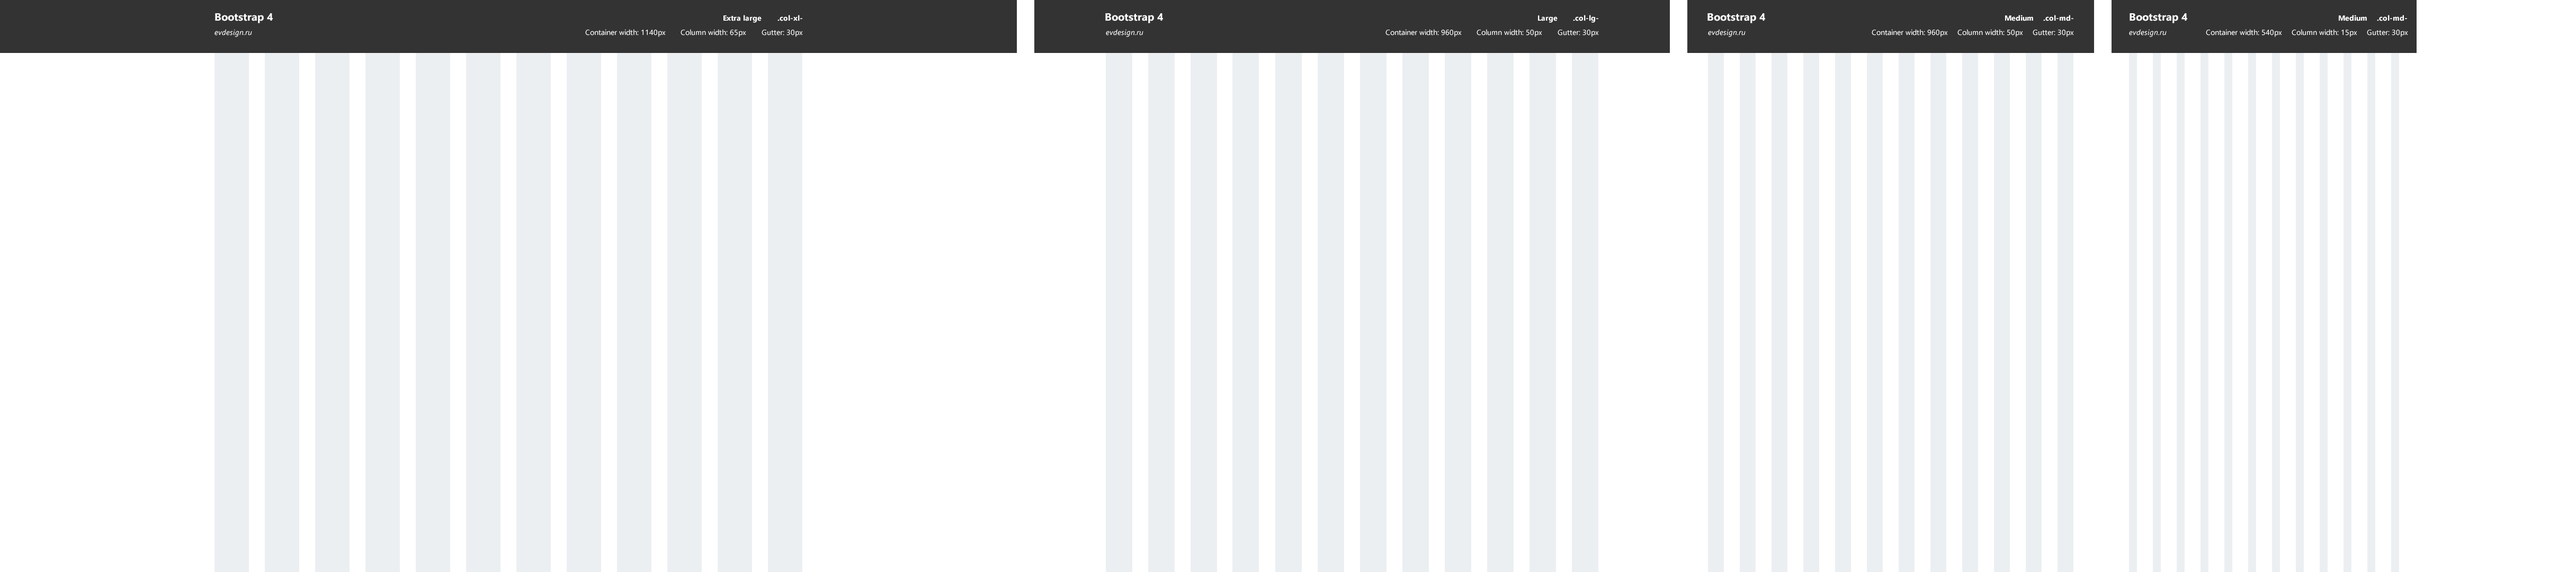
<style>
.page{position:relative;width:2576px;height:572px;background:#ffffff}
.page>*{position:absolute;margin:0}
.t1{font:10.6px "SegoeUI-Bold";color:#ffffff}
.t2{font:7.4px "SegoeUI-Bold";color:#ffffff}
.t3{font:7.4px "SegoeUI-Italic";color:#ffffff}
.t4{font:7.4px "SegoeUI";color:#ffffff}
</style>
<div class="page">
<p class="t1" style="left:215px;top:13px;width:58px;height:10px">Bootstrap 4</p>
<p class="t2" style="left:723px;top:15px;width:39px;height:8px">Extra large</p>
<p class="t2" style="left:777px;top:15px;width:25px;height:6px">.col-xl-</p>
<p class="t1" style="left:1105px;top:13px;width:58px;height:10px">Bootstrap 4</p>
<p class="t2" style="left:1538px;top:15px;width:20px;height:8px">Large</p>
<p class="t2" style="left:1573px;top:15px;width:25px;height:8px">.col-lg-</p>
<p class="t1" style="left:1707px;top:13px;width:58px;height:10px">Bootstrap 4</p>
<p class="t2" style="left:2005px;top:15px;width:28px;height:6px">Medium</p>
<p class="t2" style="left:2043px;top:15px;width:30px;height:6px">.col-md-</p>
<p class="t1" style="left:2130px;top:13px;width:57px;height:10px">Bootstrap 4</p>
<p class="t2" style="left:2339px;top:15px;width:28px;height:6px">Medium</p>
<p class="t2" style="left:2377px;top:15px;width:30px;height:6px">.col-md-</p>
<p class="t3" style="left:214px;top:29px;width:38px;height:8px">evdesign.ru</p>
<p class="t4" style="left:585px;top:29px;width:81px;height:8px">Container width: 1140px</p>
<p class="t4" style="left:681px;top:29px;width:65px;height:8px">Column width: 65px</p>
<p class="t4" style="left:762px;top:30px;width:41px;height:7px">Gutter: 30px</p>
<p class="t3" style="left:1106px;top:29px;width:37px;height:8px">evdesign.ru</p>
<p class="t4" style="left:1385px;top:29px;width:77px;height:8px">Container width: 960px</p>
<p class="t4" style="left:1477px;top:29px;width:65px;height:8px">Column width: 50px</p>
<p class="t4" style="left:1558px;top:30px;width:41px;height:7px">Gutter: 30px</p>
<p class="t3" style="left:1708px;top:29px;width:38px;height:8px">evdesign.ru</p>
<p class="t4" style="left:1872px;top:29px;width:76px;height:8px">Container width: 960px</p>
<p class="t4" style="left:1957px;top:29px;width:66px;height:8px">Column width: 50px</p>
<p class="t4" style="left:2033px;top:30px;width:41px;height:7px">Gutter: 30px</p>
<p class="t3" style="left:2129px;top:29px;width:38px;height:8px">evdesign.ru</p>
<p class="t4" style="left:2206px;top:29px;width:76px;height:8px">Container width: 540px</p>
<p class="t4" style="left:2292px;top:29px;width:65px;height:8px">Column width: 15px</p>
<p class="t4" style="left:2367px;top:30px;width:41px;height:7px">Gutter: 30px</p>
</div>
